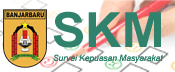
<style>
.page{position:relative;width:175px;height:72px;background:#ffffff}
.page>*{position:absolute;margin:0}
.t1{font:48.5px "Arial-BoldMT";color:#30826c;scale:1.04 1}
.t2{font:8.4px "Arial-ItalicMT";color:#30826c}
</style>
<div class="page">
<p class="t1" style="left:53px;top:11px;width:108px;height:37px">SKM</p>
<p class="t2" style="left:53px;top:54px;width:110px;height:9px">Survei Kepuasan Masyarakat</p>
</div>
